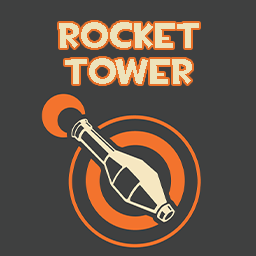
<style>
.page{position:relative;width:256px;height:256px;background:#3f4040}
.page>*{position:absolute;margin:0}
.t1{font:36px/36px "TF2Build";color:#ede3bb}
</style>
<div class="page">
<p class="t1" style="left:59px;top:22px;width:140px;height:62px;text-align:center">Rocket<br>Tower</p>
</div>
